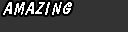
<style>
.page{position:relative;width:128px;height:32px;background:#333333}
.page>*{position:absolute;margin:0}
.t1{font:18px "DomDiagonalBT-Regular";letter-spacing:0.1em;color:#fbfbfb}
</style>
<div class="page">
<p class="t1" style="left:3px;top:2px;width:69px;height:13px">AMAZING</p>
</div>
